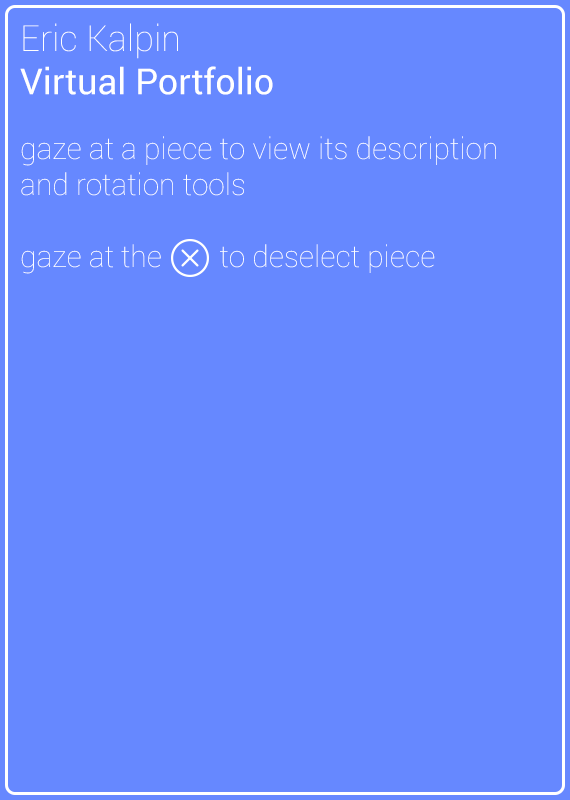
<style>
.page{position:relative;width:570px;height:800px;background:#6688ff}
.page>*{position:absolute;margin:0}
.t1{font:30px "Roboto-Thin";color:#ffffff}
.t2{font:36px "Roboto-Thin";color:#ffffff}
.t3{font:36px "Roboto-Regular";color:#ffffff}
</style>
<div class="page">
<p class="t1" style="left:20px;top:23px;width:476px;height:251px"><span class="t2">Eric Kalpin<br></span><span class="t3">Virtual Portfolio<br><br></span>gaze at a piece to view its description and rotation tools<br><br>gaze at the        to deselect piece</p>
</div>
